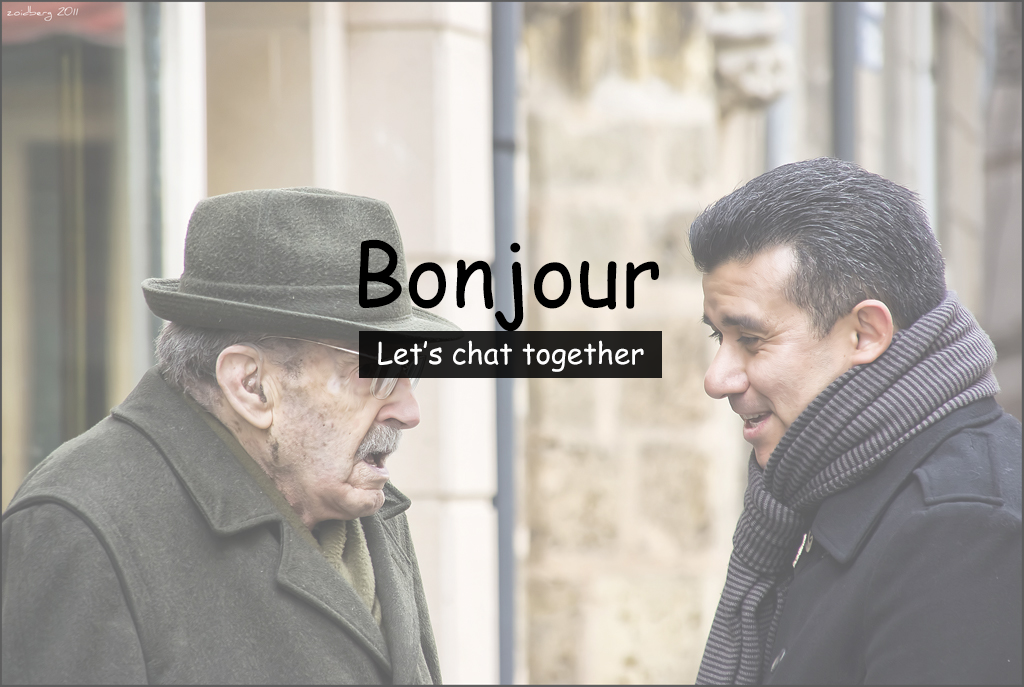
<style>
.page{position:relative;width:1024px;height:687px}
.page>*{position:absolute;margin:0}
.t1{font:86.4px "ComicSansMS";color:#000000}
.t2{font:29.4px "ComicSansMS";color:#ffffff}
</style>
<div class="page">
<p class="t1" style="left:359px;top:239px;width:300px;height:93px">Bonjour</p>
<p class="t2" style="left:378px;top:340px;width:266px;height:32px">Let’s chat together</p>
</div>
